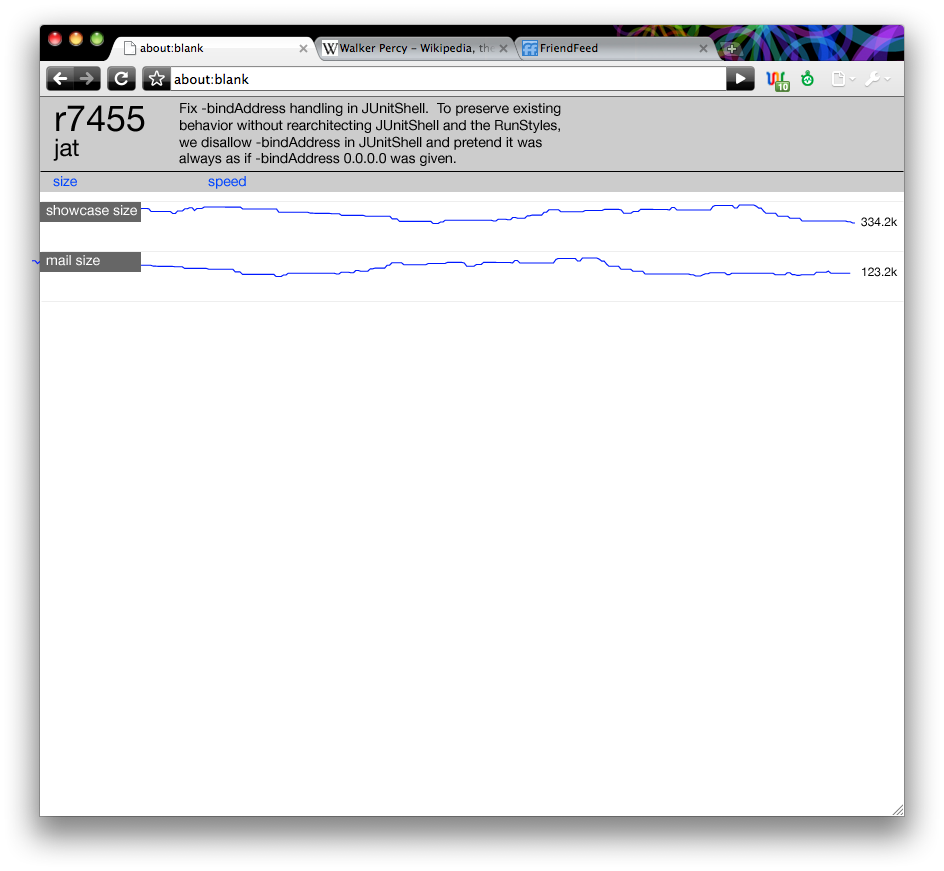
<style>
.page{position:relative;width:944px;height:871px;background:#ffffff}
.page>*{position:absolute;margin:0}
.t1{font:14px "HelveticaNeue";color:#000000}
.t2{font:36px "HelveticaNeue";color:#000000}
.t3{font:24px "HelveticaNeue";color:#000000}
.t4{font:14px "HelveticaNeue";color:#0044ff}
.t5{font:14px "HelveticaNeue";color:#ffffff}
.t6{font:12px "HelveticaNeue";color:#000000}
</style>
<div class="page">
<p class="t1" style="left:179px;top:102px;width:382px;height:64px">Fix -bindAddress handling in JUnitShell.  To preserve existing<br>behavior without rearchitecting JUnitShell and the RunStyles,<br>we disallow -bindAddress in JUnitShell and pretend it was always as if -bindAddress 0.0.0.0 was given.</p>
<p class="t2" style="left:56px;top:105px;width:89px;height:27px">r7455</p>
<p class="t3" style="left:53px;top:138px;width:26px;height:23px">jat</p>
<p class="t4" style="left:53px;top:176px;width:24px;height:11px">size</p>
<p class="t4" style="left:208px;top:176px;width:38px;height:13px">speed</p>
<p class="t5" style="left:46px;top:205px;width:91px;height:11px">showcase size</p>
<p class="t6" style="left:861px;top:217px;width:37px;height:10px">334.2k</p>
<p class="t5" style="left:46px;top:255px;width:54px;height:11px">mail size</p>
<p class="t6" style="left:862px;top:267px;width:36px;height:10px">123.2k</p>
</div>
